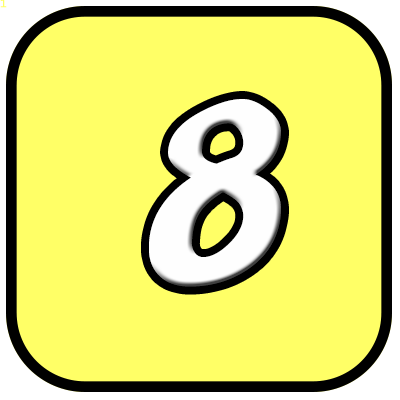
<style>
.page{position:relative;width:400px;height:400px;background:#ffff66}
.page>*{position:absolute;margin:0}
.t1{font:10.7px "LucidaConsole";color:#ffff66}
.t2{font:240px "Yikes";color:#fefefe}
</style>
<div class="page">
<p class="t1" style="left:0px;top:0px;width:7px;height:8px">1</p>
<p class="t2" style="left:149px;top:99px;width:132px;height:188px">8</p>
</div>
